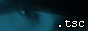
<style>
.page{position:relative;width:88px;height:31px}
.page>*{position:absolute;margin:0}
.t1{font:12px "CourierNewPSMT";color:#ffffff}
</style>
<div class="page">
<p class="t1" style="left:59px;top:20px;width:25px;height:7px">.tsc</p>
</div>
